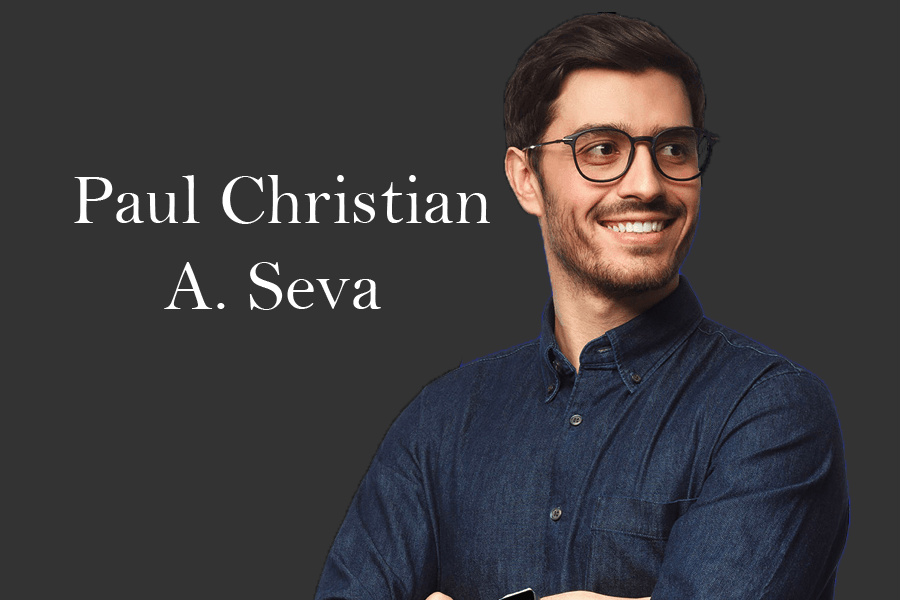
<style>
.page{position:relative;width:900px;height:600px;background:#333333}
.page>*{position:absolute;margin:0}
.t1{font:72px "BellMT";color:#ffffff}
</style>
<div class="page">
<p class="t1" style="left:74px;top:175px;width:416px;height:135px;text-align:center">Paul Christian <br>A. Seva</p>
</div>
